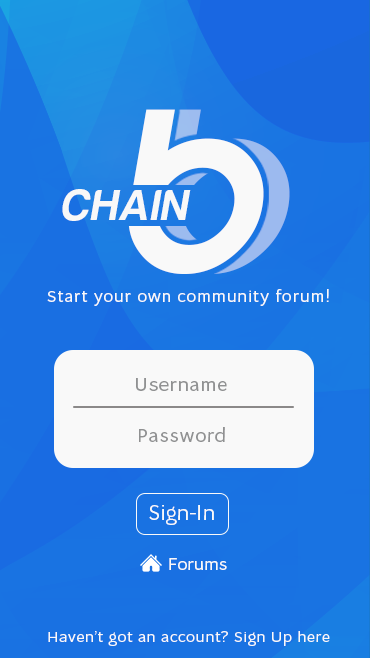
<style>
.page{position:relative;width:370px;height:658px}
.page>*{position:absolute;margin:0}
.t1{font:198.4px "AndThenItEnds";letter-spacing:0.02em;color:#f9f9f9;text-transform:uppercase;font-style:italic}
.t2{font:198.4px "AndThenItEnds";letter-spacing:0.02em;text-transform:uppercase;font-style:italic}
.t3{font:44.6px "HarabaraMaisBold-HarabaraMaisBold";letter-spacing:0.02em;color:#f8f8f8;text-transform:uppercase;font-style:italic}
.t4{font:17px "OsnovaPro";letter-spacing:0.05em;color:#f9f9f9}
.t5{font:19.7px "OsnovaPro";letter-spacing:0.03em;color:#909192}
.t6{font:21.8px "OsnovaPro";letter-spacing:-0.01em;color:#f9f9f9}
.t7{font:18px "OsnovaPro";letter-spacing:-0.01em;color:#f9f9f9}
.t8{font:14.3px "OsnovaPro";letter-spacing:0.03em;color:#f9f9f9;scale:1.09 1}
</style>
<div class="page">
<p class="t1" style="left:128px;top:109px;width:136px;height:165px">B</p>
<p class="t2" style="left:154px;top:109px;width:136px;height:165px">B</p>
<p class="t3" style="left:62px;top:189px;width:129px;height:32px">Chain</p>
<p class="t4" style="left:47px;top:289px;width:282px;height:17px">Start your own community forum!</p>
<p class="t5" style="left:136px;top:378px;width:91px;height:13px">Username</p>
<p class="t5" style="left:139px;top:427px;width:86px;height:15px">Password</p>
<p class="t6" style="left:149px;top:505px;width:65px;height:20px">Sign-In</p>
<p class="t7" style="left:169px;top:558px;width:58px;height:12px">Forums</p>
<p class="t8" style="left:48px;top:631px;width:282px;height:15px">Haven’t got an account? Sign Up here</p>
</div>
